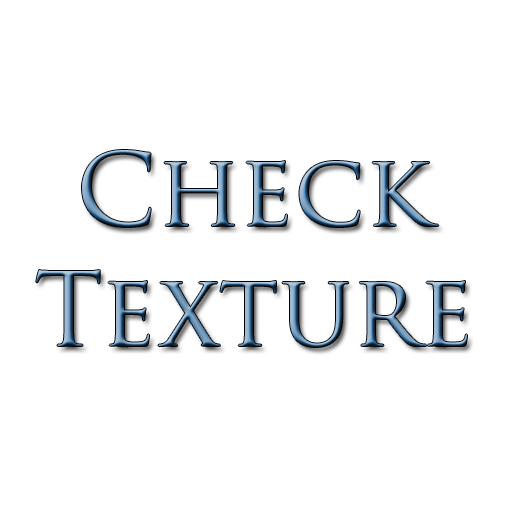
<style>
.page{position:relative;width:512px;height:512px;background:#ffffff}
.page>*{position:absolute;margin:0}
.t1{font:100px "TrajanPro-Regular"}
</style>
<div class="page">
<p class="t1" style="left:36px;top:150px;width:431px;height:197px;text-align:center">Check<br>Texture</p>
</div>
